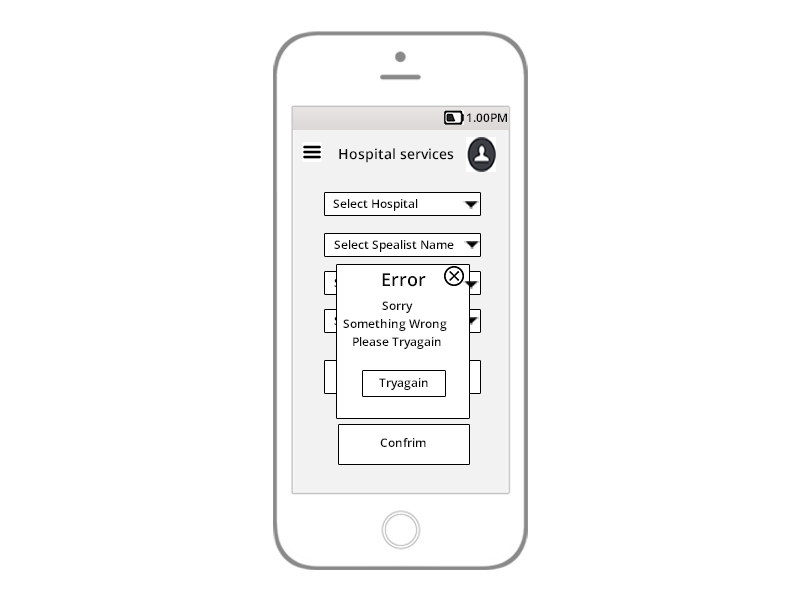
<style>
.page{position:relative;width:800px;height:600px;background:#ffffff}
.page>*{position:absolute;margin:0}
.t1{font:12px "OpenSans-Semibold";color:#090909}
.t2{font:14px "OpenSans-Semibold";color:#090909}
.t3{font:18px "OpenSans-Semibold";color:#090909}
.t4{font:12px/6px "OpenSans-Semibold";color:#090909}
</style>
<div class="page">
<p class="t1" style="left:467px;top:113px;width:40px;height:9px"><span class="t2">                                         </span>1.00PM</p>
<p class="t2" style="left:339px;top:148px;width:115px;height:15px">Hospital services</p>
<p class="t1" style="left:333px;top:199px;width:85px;height:12px"><span class="t2">  <br> </span> Select Hospital</p>
<p class="t1" style="left:334px;top:240px;width:120px;height:12px">Select Spealist Name</p>
<p class="t3" style="left:382px;top:273px;width:44px;height:14px"><span class="t1"><br>  <br>           </span>Error</p>
<p class="t4" style="left:343px;top:301px;width:104px;height:48px">Sorry<br><br>  <br>  Something Wrong<br><br>  <br>     Please Tryagain</p>
<p class="t1" style="left:379px;top:378px;width:49px;height:12px">Tryagain</p>
<p class="t1" style="left:380px;top:438px;width:46px;height:9px">Confrim</p>
</div>
